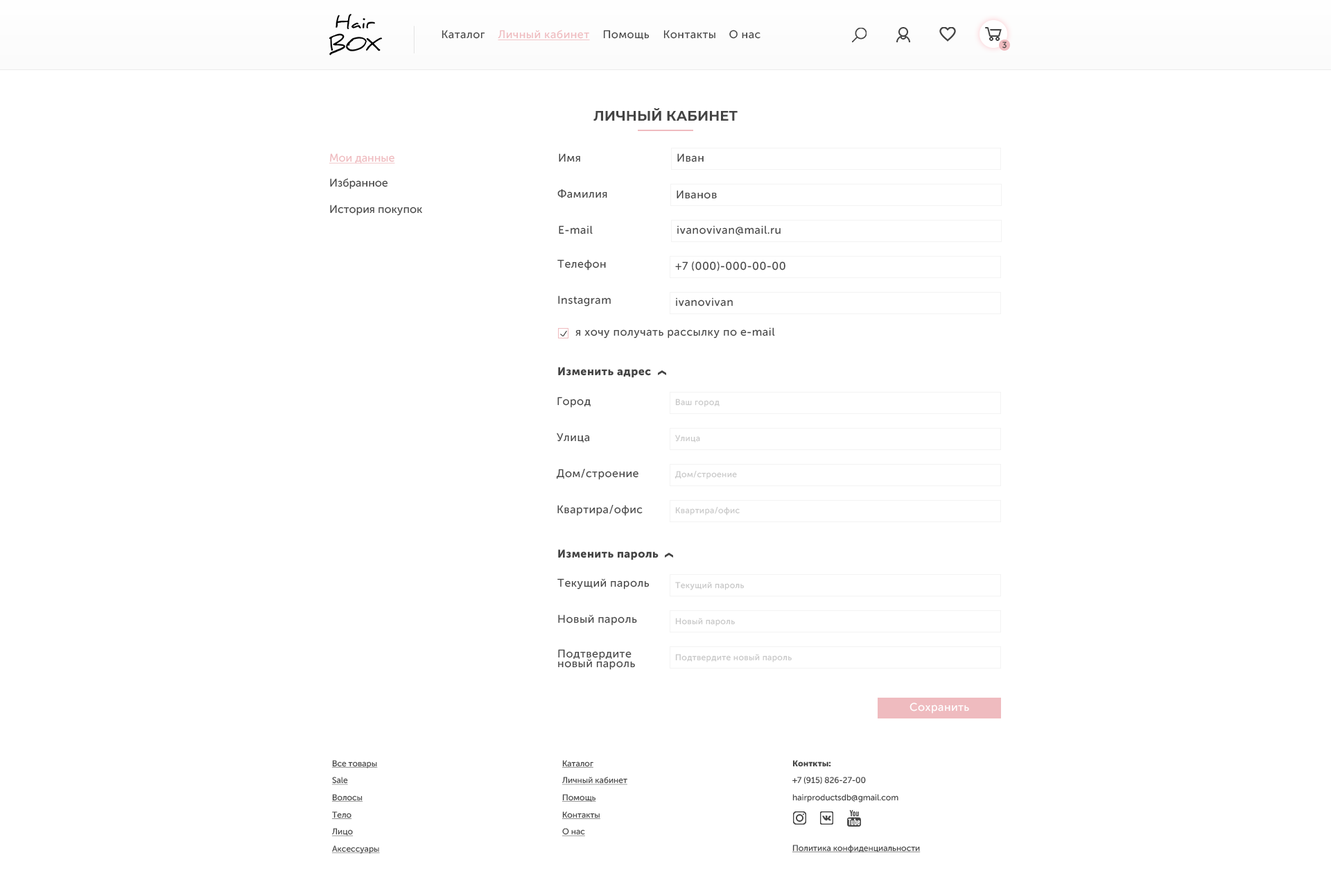
<style>
.page{position:relative;width:1331px;height:896px;background:#ffffff}
.page>*{position:absolute;margin:0}
.t1{font:11.1px "MuseoSansCyrl-500";letter-spacing:0.03em;color:#444444}
.t2{font:11.1px "MuseoSansCyrl-500";letter-spacing:0.03em;color:#efbbbf;text-decoration:underline}
.t3{font:8.3px "MuseoSansCyrl-500";letter-spacing:0.03em;color:#444444}
.t4{font:13.7px "Montserrat-Bold";color:#444444;text-transform:uppercase}
.t5{font:11.1px "MuseoSansCyrl-500";color:#efbbbf;text-decoration:underline}
.t6{font:11.1px "MuseoSansCyrl-500";color:#444444}
.t7{font:11.1px "MuseoSansCyrl-900";letter-spacing:0.03em;color:#444444}
.t8{font:8.3px "MuseoSansCyrl-500";letter-spacing:0.03em;color:#c9c9c9}
.t9{font:8.3px "MuseoSansCyrl-500";letter-spacing:0.03em;color:#c7c7c7}
.t10{font:11.1px/9.7px "MuseoSansCyrl-500";letter-spacing:0.03em;color:#444444}
.t11{font:11.1px "MuseoSansCyrl-500";letter-spacing:0.03em;color:#ffffff}
.t12{font:8.3px/17.1px "MuseoSansCyrl-500";color:#444444;text-decoration:underline}
.t13{font:8.3px/17.1px "MuseoSansCyrl-500";color:#444444}
.t14{font:8.3px/17.1px "MuseoSansCyrl-900";color:#444444}
.t15{font:8.3px "MuseoSansCyrl-500";color:#444444;text-decoration:underline}
</style>
<div class="page">
<p class="t1" style="left:442px;top:30px;width:43px;height:9px">Каталог</p>
<p class="t2" style="left:498px;top:30px;width:92px;height:10px">Личный кабинет</p>
<p class="t1" style="left:603px;top:30px;width:47px;height:10px">Помощь</p>
<p class="t1" style="left:664px;top:30px;width:52px;height:9px">Контакты</p>
<p class="t1" style="left:729px;top:30px;width:32px;height:9px">О нас</p>
<p class="t3" style="left:1003px;top:42px;width:4px;height:7px">3</p>
<p class="t4" style="left:593px;top:108px;width:145px;height:13px">личный кабинет</p>
<p class="t5" style="left:329px;top:153px;width:66px;height:11px">Мои данные</p>
<p class="t1" style="left:559px;top:153px;width:21px;height:9px">Имя</p>
<p class="t1" style="left:677px;top:153px;width:27px;height:9px">Иван</p>
<p class="t6" style="left:330px;top:178px;width:58px;height:11px">Избранное</p>
<p class="t1" style="left:557px;top:189px;width:50px;height:9px">Фамилия</p>
<p class="t1" style="left:677px;top:190px;width:40px;height:9px">Иванов</p>
<p class="t6" style="left:330px;top:205px;width:92px;height:11px">История покупок</p>
<p class="t1" style="left:559px;top:225px;width:34px;height:9px">E-mail</p>
<p class="t1" style="left:677px;top:225px;width:104px;height:11px">ivanovivan@mail.ru</p>
<p class="t1" style="left:557px;top:259px;width:49px;height:11px">Телефон</p>
<p class="t1" style="left:675px;top:261px;width:111px;height:10px">+7 (000)-000-00-00</p>
<p class="t1" style="left:558px;top:295px;width:53px;height:11px">Instagram</p>
<p class="t1" style="left:676px;top:297px;width:57px;height:9px">ivanovivan</p>
<p class="t1" style="left:575px;top:327px;width:200px;height:11px">я хочу получать рассылку по e-mail</p>
<p class="t7" style="left:558px;top:367px;width:93px;height:11px">Изменить адрес</p>
<p class="t1" style="left:557px;top:397px;width:34px;height:11px">Город</p>
<p class="t8" style="left:675px;top:399px;width:45px;height:8px">Ваш город</p>
<p class="t1" style="left:557px;top:433px;width:33px;height:9px">Улица</p>
<p class="t8" style="left:675px;top:435px;width:25px;height:7px">Улица</p>
<p class="t1" style="left:556px;top:469px;width:83px;height:11px">Дом/строение</p>
<p class="t8" style="left:675px;top:470px;width:62px;height:9px">Дом/строение</p>
<p class="t1" style="left:557px;top:505px;width:86px;height:11px">Квартира/офис</p>
<p class="t8" style="left:675px;top:506px;width:65px;height:9px">Квартира/офис</p>
<p class="t7" style="left:558px;top:549px;width:101px;height:11px">Изменить пароль</p>
<p class="t1" style="left:557px;top:578px;width:93px;height:11px">Текущий пароль</p>
<p class="t9" style="left:675px;top:582px;width:70px;height:8px">Текущий пароль</p>
<p class="t1" style="left:558px;top:614px;width:79px;height:11px">Новый пароль</p>
<p class="t9" style="left:675px;top:618px;width:60px;height:8px">Новый пароль</p>
<p class="t10" style="left:558px;top:649px;width:77px;height:21px">Подтвердите<br>новый пароль</p>
<p class="t9" style="left:675px;top:654px;width:117px;height:8px">Подтвердите новый пароль</p>
<p class="t11" style="left:910px;top:702px;width:59px;height:11px">Сохранить</p>
<p class="t12" style="left:331px;top:760px;width:49px;height:93px">Все товары<br>Sale<br>Волосы<br>Тело<br>Лицо<br>Аксессуары</p>
<p class="t12" style="left:562px;top:760px;width:65px;height:76px">Каталог<br>Личный кабинет<br>Помощь<br>Контакты<br>О нас</p>
<p class="t13" style="left:792px;top:760px;width:107px;height:42px"><span class="t14">Конткты:<br></span>+7 (915) 826-27-00<br>hairproductsdb@gmail.com</p>
<p class="t15" style="left:792px;top:844px;width:129px;height:9px">Политика конфиденциальности</p>
</div>
